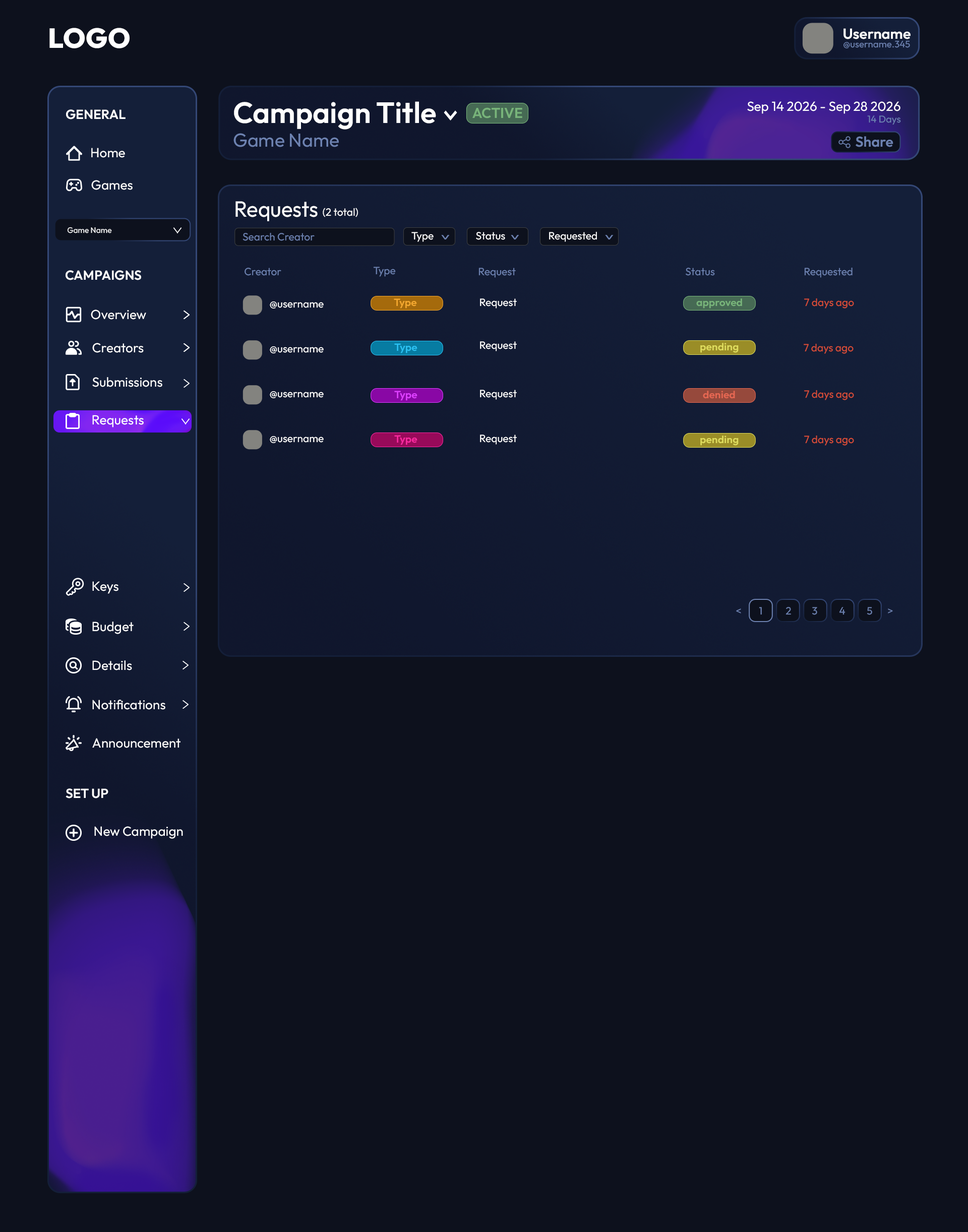
<style>
.page{position:relative;width:968px;height:1232px;background:#0d111d}
.page>*{position:absolute;margin:0}
.t1{font:27.6px "Outfit-ExtraBold";color:#ffffff}
.t2{font:14.6px "Outfit-SemiBold";color:#ffffff}
.t3{font:9.4px "Outfit-Regular";color:#6d82b1}
.t4{font:29.4px "Outfit-SemiBold";color:#ffffff}
.t5{font:13.2px "Outfit-Regular";color:#ffffff}
.t6{font:13.2px "Outfit-SemiBold";color:#ffffff}
.t7{font:14.3px "Outfit-SemiBold";color:#78b47a}
.t8{font:9.9px "Outfit-Regular";color:#6d82b1}
.t9{font:18.9px "Outfit-Regular";color:#6d82b1}
.t10{font:14.3px "Outfit-SemiBold";color:#6d82b1}
.t11{font:22.1px "Outfit-Regular";color:#ffffff;scale:0.96 1}
.t12{font:10.6px "Outfit-Regular";color:#ffffff}
.t13{font:7.9px "Outfit-Regular";color:#ffffff}
.t14{font:10.6px "Outfit-Regular";color:#6d82b1}
.t15{font:17.7px "Outfit-Regular";color:#6d82b1;scale:0.59 1}
.t16{font:10.3px "Outfit-SemiBold";color:#f3a72f}
.t17{font:10.3px "Outfit-SemiBold";color:#78b47a}
.t18{font:10.6px "Outfit-Regular";color:#d84d37}
.t19{font:10.3px "Outfit-SemiBold";color:#2bc0f1}
.t20{font:10.3px "Outfit-SemiBold";color:#dedc5d}
.t21{font:10.3px "Outfit-SemiBold";color:#dd40ff}
.t22{font:10.3px "Outfit-SemiBold";color:#e66752}
.t23{font:10.3px "Outfit-SemiBold";color:#fa2aa0}
</style>
<div class="page">
<p class="t1" style="left:49px;top:28px;width:81px;height:20px">LOGO</p>
<p class="t2" style="left:843px;top:28px;width:67px;height:11px">Username</p>
<p class="t3" style="left:843px;top:40px;width:67px;height:8px">@username.345</p>
<p class="t4" style="left:234px;top:101px;width:202px;height:29px">Campaign Title</p>
<p class="t5" style="left:747px;top:101px;width:153px;height:13px">Sep 14 2026 - Sep 28 2026</p>
<p class="t6" style="left:66px;top:109px;width:60px;height:10px">GENERAL</p>
<p class="t7" style="left:472px;top:107px;width:50px;height:11px">ACTIVE</p>
<p class="t8" style="left:867px;top:115px;width:34px;height:10px">14 Days</p>
<p class="t9" style="left:233px;top:133px;width:106px;height:14px">Game Name</p>
<p class="t10" style="left:855px;top:136px;width:38px;height:11px">Share</p>
<p class="t5" style="left:91px;top:148px;width:34px;height:10px">Home</p>
<p class="t5" style="left:91px;top:180px;width:42px;height:10px">Games</p>
<p class="t11" style="left:235px;top:201px;width:83px;height:20px">Requests</p>
<p class="t12" style="left:323px;top:208px;width:35px;height:9px">(2 total)</p>
<p class="t13" style="left:67px;top:227px;width:45px;height:6px">Game Name</p>
<p class="t14" style="left:242px;top:232px;width:73px;height:9px">Search Creator</p>
<p class="t12" style="left:411px;top:232px;width:23px;height:10px">Type</p>
<p class="t12" style="left:476px;top:232px;width:29px;height:8px">Status</p>
<p class="t12" style="left:549px;top:231px;width:48px;height:11px">Requested</p>
<p class="t15" style="left:441px;top:235px;width:9px;height:5px;rotate:90deg">&gt;</p>
<p class="t15" style="left:511px;top:235px;width:8px;height:5px;rotate:90deg">&gt;</p>
<p class="t15" style="left:605px;top:235px;width:8px;height:5px;rotate:90deg">&gt;</p>
<p class="t14" style="left:244px;top:268px;width:37px;height:8px">Creator</p>
<p class="t14" style="left:373px;top:267px;width:23px;height:10px">Type</p>
<p class="t14" style="left:478px;top:268px;width:38px;height:10px">Request</p>
<p class="t14" style="left:686px;top:268px;width:29px;height:8px">Status</p>
<p class="t14" style="left:804px;top:267px;width:48px;height:11px">Requested</p>
<p class="t6" style="left:66px;top:270px;width:75px;height:10px">CAMPAIGNS</p>
<p class="t12" style="left:270px;top:301px;width:54px;height:8px">@username</p>
<p class="t16" style="left:394px;top:298px;width:23px;height:11px">Type</p>
<p class="t12" style="left:480px;top:298px;width:37px;height:11px">Request</p>
<p class="t17" style="left:696px;top:298px;width:46px;height:11px">approved</p>
<p class="t18" style="left:804px;top:298px;width:50px;height:11px">7 days ago</p>
<p class="t5" style="left:91px;top:310px;width:55px;height:10px">Overview</p>
<p class="t12" style="left:480px;top:341px;width:37px;height:10px">Request</p>
<p class="t5" style="left:92px;top:343px;width:52px;height:10px">Creators</p>
<p class="t12" style="left:270px;top:346px;width:54px;height:8px">@username</p>
<p class="t19" style="left:394px;top:343px;width:23px;height:10px">Type</p>
<p class="t20" style="left:700px;top:343px;width:39px;height:10px">pending</p>
<p class="t18" style="left:804px;top:343px;width:49px;height:11px">7 days ago</p>
<p class="t5" style="left:92px;top:377px;width:70px;height:10px">Submissions</p>
<p class="t12" style="left:480px;top:390px;width:37px;height:10px">Request</p>
<p class="t18" style="left:804px;top:390px;width:50px;height:10px">7 days ago</p>
<p class="t12" style="left:270px;top:391px;width:54px;height:8px">@username</p>
<p class="t21" style="left:394px;top:391px;width:23px;height:10px">Type</p>
<p class="t22" style="left:703px;top:391px;width:32px;height:8px">denied</p>
<p class="t5" style="left:92px;top:415px;width:52px;height:12px">Requests</p>
<p class="t12" style="left:270px;top:436px;width:54px;height:8px">@username</p>
<p class="t23" style="left:394px;top:435px;width:23px;height:10px">Type</p>
<p class="t12" style="left:480px;top:435px;width:37px;height:10px">Request</p>
<p class="t20" style="left:700px;top:436px;width:39px;height:10px">pending</p>
<p class="t18" style="left:804px;top:435px;width:50px;height:11px">7 days ago</p>
<p class="t5" style="left:92px;top:581px;width:26px;height:13px">Keys</p>
<p class="t14" style="left:736px;top:608px;width:5px;height:5px">&lt;</p>
<p class="t14" style="left:759px;top:607px;width:3px;height:8px">1</p>
<p class="t14" style="left:785px;top:607px;width:6px;height:8px">2</p>
<p class="t14" style="left:812px;top:607px;width:5px;height:8px">3</p>
<p class="t14" style="left:839px;top:607px;width:6px;height:8px">4</p>
<p class="t14" style="left:867px;top:607px;width:5px;height:8px">5</p>
<p class="t14" style="left:888px;top:608px;width:5px;height:5px">&gt;</p>
<p class="t5" style="left:92px;top:622px;width:42px;height:12px">Budget</p>
<p class="t5" style="left:92px;top:660px;width:40px;height:10px">Details</p>
<p class="t5" style="left:92px;top:700px;width:73px;height:10px">Notifications</p>
<p class="t5" style="left:92px;top:738px;width:88px;height:10px">Announcement</p>
<p class="t6" style="left:66px;top:788px;width:42px;height:10px">SET UP</p>
<p class="t5" style="left:94px;top:826px;width:89px;height:13px">New Campaign</p>
</div>
